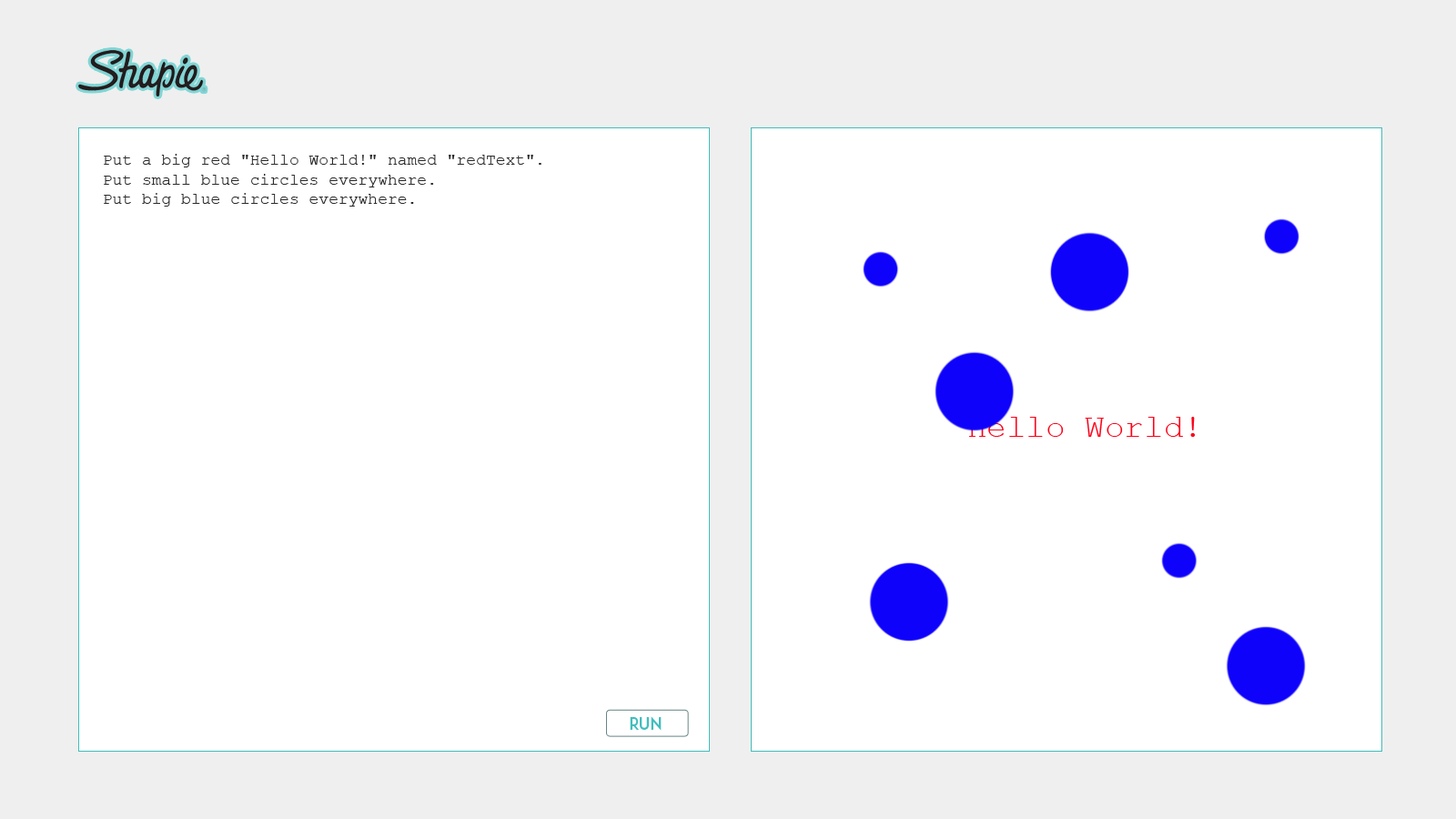
<style>
.page{position:relative;width:1456px;height:819px;background:#ffffff}
.page>*{position:absolute;margin:0}
.t1{font:16.4px "CourierNewPSMT";color:#2a2a2a}
.t2{font:32.8px "CourierNewPSMT";color:#fb0219}
.t3{font:16.4px "ADAM.CGPRO";color:#41bdbd}
</style>
<div class="page">
<p class="t1" style="left:104px;top:154px;width:437px;height:53px">Put a big red "Hello World!" named "redText". <br>Put small blue circles everywhere.<br>Put big blue circles everywhere.</p>
<p class="t2" style="left:968px;top:417px;width:227px;height:20px">Hello World!</p>
<p class="t3" style="left:630px;top:716px;width:32px;height:15px">run</p>
</div>
